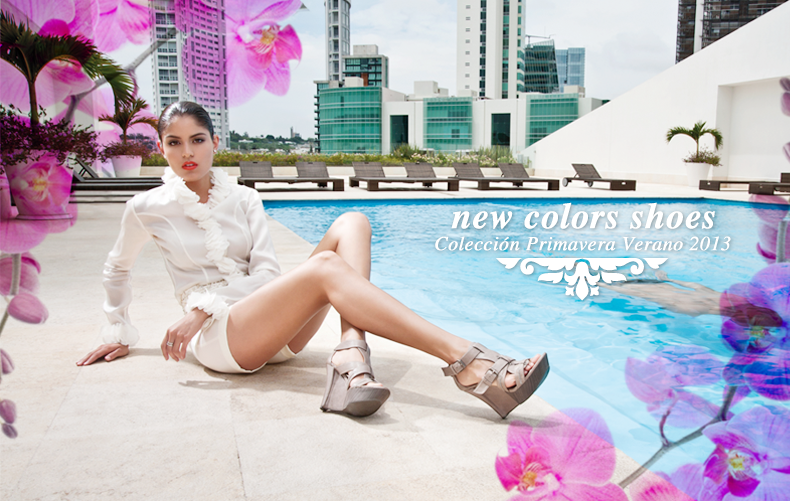
<style>
.page{position:relative;width:790px;height:501px}
.page>*{position:absolute;margin:0}
.t1{font:36px "Times-BoldItalic";color:#ffffff;font-weight:bold}
.t2{font:20px "Times-Italic";color:#ffffff;font-weight:bold}
</style>
<div class="page">
<p class="t1" style="left:451px;top:202px;width:264px;height:27px">new colors shoes</p>
<p class="t2" style="left:435px;top:236px;width:296px;height:15px">Colección Primavera Verano 2013</p>
</div>
